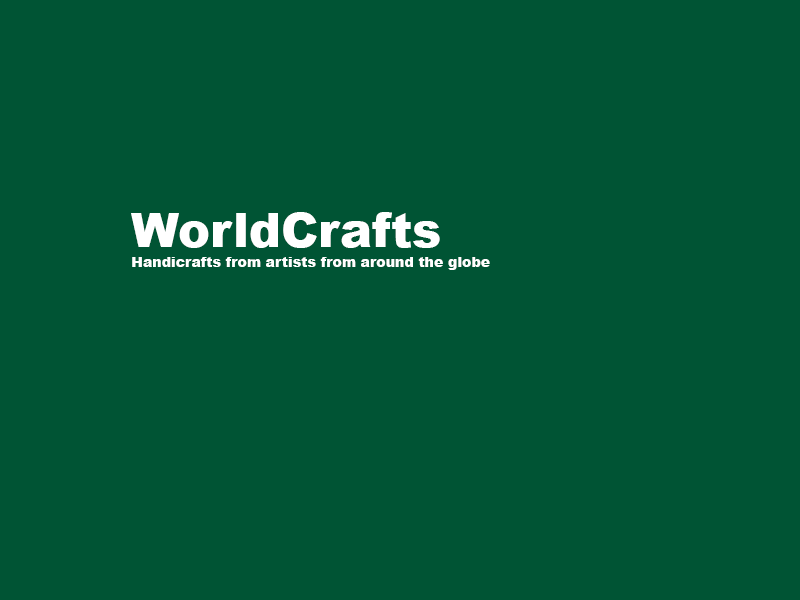
<style>
.page{position:relative;width:800px;height:600px;background:#005434}
.page>*{position:absolute;margin:0}
.t1{font:48px "Arial-Black";color:#ffffff}
.t2{font:14px "Arial-Black";color:#ffffff}
</style>
<div class="page">
<p class="t1" style="left:131px;top:212px;width:309px;height:36px">WorldCrafts</p>
<p class="t2" style="left:132px;top:257px;width:358px;height:13px">Handicrafts from artists from around the globe</p>
</div>
